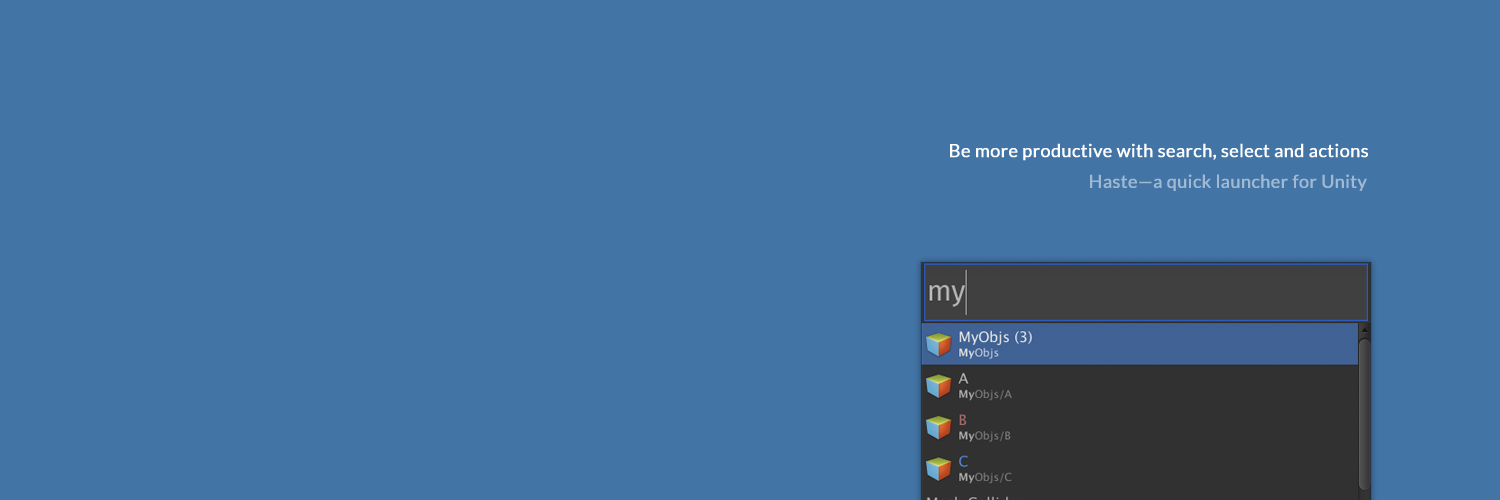
<style>
.page{position:relative;width:1500px;height:500px;background:#4274a6}
.page>*{position:absolute;margin:0}
.t1{font:18px "Lato-Regular";color:#ffffff;font-weight:bold}
.t2{font:18px "Lato-Regular";color:#a1bad3;font-weight:bold}
</style>
<div class="page">
<p class="t1" style="left:950px;top:143px;width:418px;height:18px">Be more productive with search, select and actions</p>
<p class="t2" style="left:1090px;top:174px;width:277px;height:17px">Haste—a quick launcher for Unity</p>
</div>
